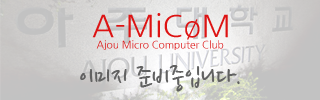
<style>
.page{position:relative;width:320px;height:100px}
.page>*{position:absolute;margin:0}
.t1{font:30.5px "NanumGothic";color:#dd1313}
.t2{font:10.2px "NanumGothic"}
.t3{font:30px "NanumPen";color:#616161}
</style>
<div class="page">
<p class="t1" style="left:92px;top:13px;width:136px;height:27px">A-MiCøM</p>
<p class="t2" style="left:96px;top:40px;width:128px;height:10px">Ajou Micro Computer Club</p>
<p class="t3" style="left:80px;top:65px;width:160px;height:27px">이미지 준비중입니다.</p>
</div>
